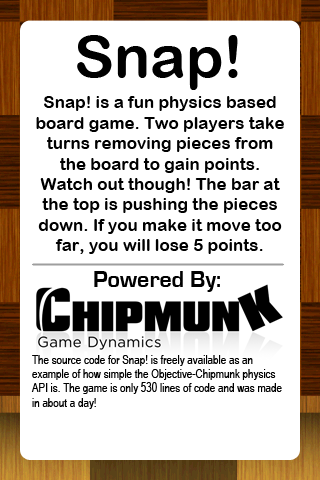
<style>
.page{position:relative;width:320px;height:480px;background:#ffffff}
.page>*{position:absolute;margin:0}
.t1{font:60px "ArialRoundedMTBold";color:#000000}
.t2{font:17px "ArialRoundedMTBold";color:#000000}
.t3{font:24px "EurostileBold";color:#000000}
.t4{font:12px "ArialNarrow";color:#000000}
</style>
<div class="page">
<p class="t1" style="left:77px;top:35px;width:161px;height:55px">Snap!</p>
<p class="t2" style="left:36px;top:96px;width:248px;height:158px;text-align:center">Snap! is a fun physics based board game. Two players take turns removing pieces from the board to gain points. Watch out though! The bar at the top is pushing the pieces down. If you make it move too far, you will lose 5 points.</p>
<p class="t3" style="left:94px;top:271px;width:126px;height:21px">Powered By:</p>
<p class="t4" style="left:31px;top:355px;width:251px;height:54px">The source code for Snap! is freely available as an example of how simple the Objective-Chipmunk physics API is. The game is only 530 lines of code and was made in about a day!</p>
</div>
